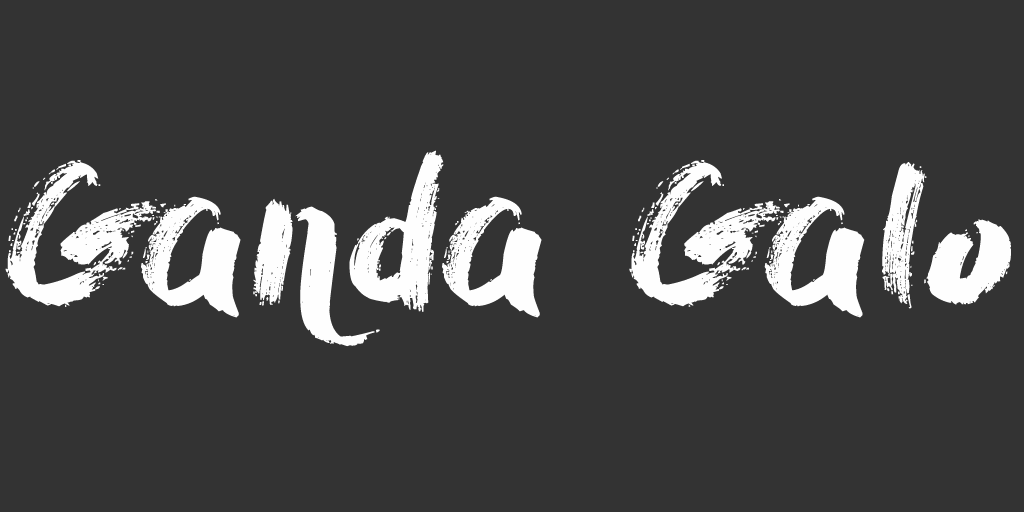
<style>
.page{position:relative;width:1024px;height:512px;background:#333333}
.page>*{position:absolute;margin:0}
.t1{font:196px "DryBrush";color:#fefefe}
</style>
<div class="page">
<p class="t1" style="left:5px;top:150px;width:1006px;height:197px">Ganda Galo</p>
</div>
